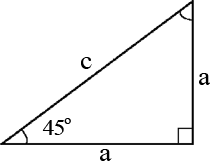
<style>
.page{position:relative;width:210px;height:163px;background:#ffffff}
.page>*{position:absolute;margin:0}
.t1{font:25.8px "TimesNewRomanPSMT";letter-spacing:-0.04em;color:#000000;scale:1.08 1}
.t2{font:22.1px "TimesNewRomanPSMT";letter-spacing:-0.04em;color:#000000;scale:1.08 1}
.t3{font:23px "TimesNewRomanPSMT";letter-spacing:-0.04em;color:#000000;scale:1.03 1}
</style>
<div class="page">
<p class="t1" style="left:81px;top:57px;width:11px;height:12px">c</p>
<p class="t1" style="left:199px;top:73px;width:11px;height:12px">a</p>
<p class="t2" style="left:42px;top:118px;width:29px;height:17px">45<span class="t3">o</span></p>
<p class="t1" style="left:100px;top:149px;width:12px;height:12px">a</p>
</div>
